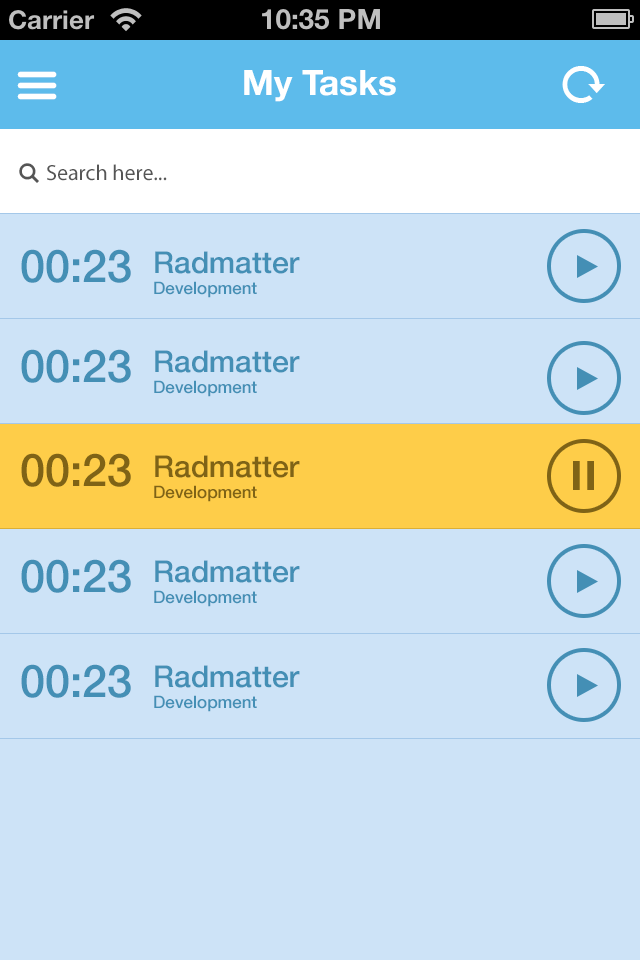
<style>
.page{position:relative;width:640px;height:960px;background:#cde3f7}
.page>*{position:absolute;margin:0}
.t1{font:55px "ticktock";color:#ffffff}
.t2{font:35px "HelveticaNeue-Bold";color:#ffffff}
.t3{font:45px "mrticktock";color:#ffffff}
.t4{font:22px "ticktock";color:#555555}
.t5{font:22px "MyriadPro-Regular";color:#555555}
.t6{font:45px "HelveticaNeue-Medium";color:#448fb5}
.t7{font:30px "HelveticaNeue-Medium";color:#448fb5}
.t8{font:17px "HelveticaNeue-Medium";color:#448fb5}
.t9{font:45px "HelveticaNeue-Medium";color:#7f6316}
.t10{font:30px "HelveticaNeue-Medium";color:#7f6316}
.t11{font:17px "HelveticaNeue-Medium";color:#7f6316}
</style>
<div class="page">
<p class="t1" style="left:17px;top:71px;width:40px;height:29px">b</p>
<p class="t2" style="left:244px;top:70px;width:152px;height:32px">My Tasks</p>
<p class="t3" style="left:562px;top:66px;width:43px;height:37px">d</p>
<p class="t4" style="left:19px;top:163px;width:20px;height:20px">a</p>
<p class="t5" style="left:47px;top:164px;width:120px;height:17px">Search here...</p>
<p class="t6" style="left:21px;top:249px;width:48px;height:34px">00</p>
<p class="t6" style="left:73px;top:249px;width:58px;height:34px">:23</p>
<p class="t7" style="left:155px;top:251px;width:145px;height:23px">Radmatter</p>
<p class="t8" style="left:154px;top:281px;width:103px;height:17px">Development</p>
<p class="t6" style="left:21px;top:349px;width:48px;height:34px">00</p>
<p class="t6" style="left:73px;top:349px;width:58px;height:34px">:23</p>
<p class="t7" style="left:155px;top:350px;width:145px;height:23px">Radmatter</p>
<p class="t8" style="left:154px;top:380px;width:103px;height:17px">Development</p>
<p class="t9" style="left:21px;top:453px;width:48px;height:34px">00</p>
<p class="t9" style="left:73px;top:453px;width:58px;height:34px">:23</p>
<p class="t10" style="left:155px;top:455px;width:145px;height:23px">Radmatter</p>
<p class="t11" style="left:154px;top:485px;width:103px;height:17px">Development</p>
<p class="t6" style="left:21px;top:559px;width:48px;height:34px">00</p>
<p class="t6" style="left:73px;top:559px;width:58px;height:34px">:23</p>
<p class="t7" style="left:155px;top:560px;width:145px;height:23px">Radmatter</p>
<p class="t8" style="left:154px;top:590px;width:103px;height:17px">Development</p>
<p class="t6" style="left:21px;top:664px;width:48px;height:34px">00</p>
<p class="t6" style="left:73px;top:664px;width:58px;height:34px">:23</p>
<p class="t7" style="left:155px;top:665px;width:145px;height:23px">Radmatter</p>
<p class="t8" style="left:154px;top:695px;width:103px;height:17px">Development</p>
</div>
